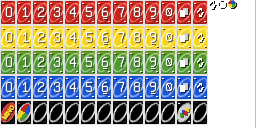
<style>
.page{position:relative;width:256px;height:128px;background:#ffffff}
.page>*{position:absolute;margin:0}
.t1{font:16px "Unifont";color:#ffffff}
.t2{font:6.6px "BerlinSansFB-Reg";color:#ffee2e}
</style>
<div class="page">
<p class="t1" style="left:5px;top:6px;width:8px;height:12px">O</p>
<p class="t1" style="left:22px;top:6px;width:7px;height:12px">1</p>
<p class="t1" style="left:37px;top:6px;width:8px;height:12px">2</p>
<p class="t1" style="left:53px;top:6px;width:8px;height:12px">3</p>
<p class="t1" style="left:69px;top:6px;width:8px;height:12px">4</p>
<p class="t1" style="left:85px;top:6px;width:8px;height:12px">5</p>
<p class="t1" style="left:101px;top:6px;width:8px;height:12px">6</p>
<p class="t1" style="left:117px;top:6px;width:8px;height:12px">7</p>
<p class="t1" style="left:133px;top:6px;width:8px;height:12px">8</p>
<p class="t1" style="left:149px;top:6px;width:8px;height:12px">9</p>
<p class="t1" style="left:165px;top:7px;width:8px;height:10px">o</p>
<p class="t1" style="left:5px;top:31px;width:8px;height:12px">O</p>
<p class="t1" style="left:22px;top:31px;width:7px;height:12px">1</p>
<p class="t1" style="left:37px;top:31px;width:8px;height:12px">2</p>
<p class="t1" style="left:53px;top:31px;width:8px;height:12px">3</p>
<p class="t1" style="left:69px;top:31px;width:8px;height:12px">4</p>
<p class="t1" style="left:85px;top:31px;width:8px;height:12px">5</p>
<p class="t1" style="left:101px;top:31px;width:8px;height:12px">6</p>
<p class="t1" style="left:117px;top:31px;width:8px;height:12px">7</p>
<p class="t1" style="left:133px;top:31px;width:8px;height:12px">8</p>
<p class="t1" style="left:149px;top:31px;width:8px;height:12px">9</p>
<p class="t1" style="left:165px;top:32px;width:8px;height:10px">o</p>
<p class="t1" style="left:5px;top:56px;width:8px;height:12px">O</p>
<p class="t1" style="left:22px;top:56px;width:7px;height:12px">1</p>
<p class="t1" style="left:37px;top:56px;width:8px;height:12px">2</p>
<p class="t1" style="left:53px;top:56px;width:8px;height:12px">3</p>
<p class="t1" style="left:69px;top:56px;width:8px;height:12px">4</p>
<p class="t1" style="left:85px;top:56px;width:8px;height:12px">5</p>
<p class="t1" style="left:101px;top:56px;width:8px;height:12px">6</p>
<p class="t1" style="left:117px;top:56px;width:8px;height:12px">7</p>
<p class="t1" style="left:133px;top:56px;width:8px;height:12px">8</p>
<p class="t1" style="left:149px;top:56px;width:8px;height:12px">9</p>
<p class="t1" style="left:165px;top:57px;width:8px;height:10px">o</p>
<p class="t1" style="left:5px;top:81px;width:8px;height:12px">O</p>
<p class="t1" style="left:22px;top:81px;width:7px;height:12px">1</p>
<p class="t1" style="left:37px;top:81px;width:8px;height:12px">2</p>
<p class="t1" style="left:53px;top:81px;width:8px;height:12px">3</p>
<p class="t1" style="left:69px;top:81px;width:8px;height:12px">4</p>
<p class="t1" style="left:85px;top:81px;width:8px;height:12px">5</p>
<p class="t1" style="left:101px;top:81px;width:8px;height:12px">6</p>
<p class="t1" style="left:117px;top:81px;width:8px;height:12px">7</p>
<p class="t1" style="left:133px;top:81px;width:8px;height:12px">8</p>
<p class="t1" style="left:149px;top:81px;width:8px;height:12px">9</p>
<p class="t1" style="left:165px;top:82px;width:8px;height:10px">o</p>
<p class="t2" style="left:2px;top:105px;width:13px;height:15px;rotate:-57deg">MINO</p>
</div>
